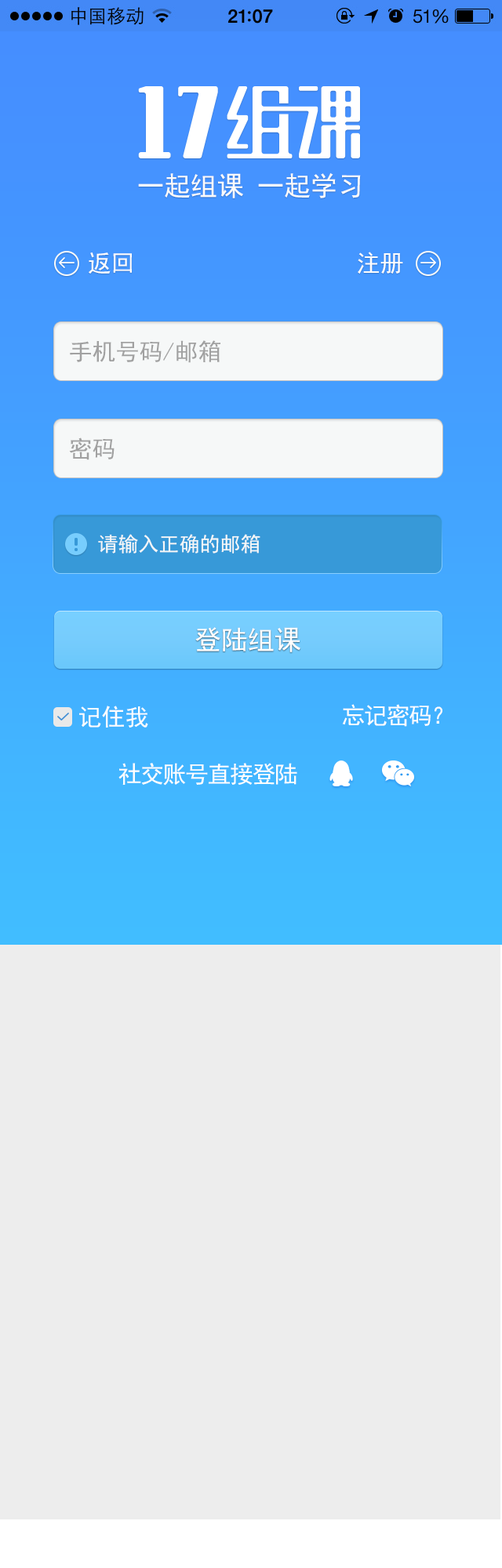
<style>
.page{position:relative;width:502px;height:1568px;background:#ededed}
.page>*{position:absolute;margin:0}
.t1{font:26.7px "SimHei";color:#fbfbfb}
.t2{font:23.5px "SimHei";color:#fefefe}
.t3{font:23.5px "SimHei";color:#a1a1a1}
.t4{font:20.4px "SimHei";color:#f6f8f8}
.t5{font:26.7px "SimHei";color:#fefefe}
.t6{font:23.5px "SimHei";letter-spacing:-0.05em;color:#fefefe}
</style>
<div class="page">
<p class="t1" style="left:138px;top:172px;width:223px;height:26px">一起组课 一起学习</p>
<p class="t2" style="left:89px;top:252px;width:43px;height:22px">返回</p>
<p class="t2" style="left:358px;top:252px;width:45px;height:22px">注册</p>
<p class="t3" style="left:70px;top:340px;width:150px;height:23px">手机号码/邮箱</p>
<p class="t3" style="left:69px;top:437px;width:45px;height:23px">密码</p>
<p class="t4" style="left:98px;top:534px;width:162px;height:20px">请输入正确的邮箱</p>
<p class="t5" style="left:195px;top:627px;width:105px;height:25px">登陆组课</p>
<p class="t2" style="left:79px;top:706px;width:69px;height:22px">记住我</p>
<p class="t6" style="left:342px;top:704px;width:100px;height:23px">忘记密码？</p>
<p class="t6" style="left:118px;top:763px;width:179px;height:23px">社交账号直接登陆</p>
</div>
